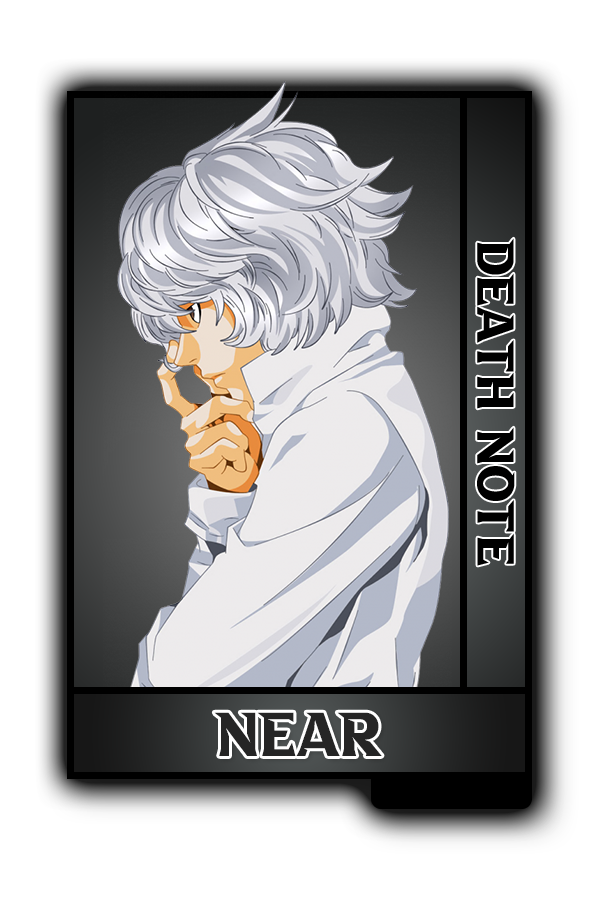
<style>
.page{position:relative;width:600px;height:900px;background:#ffffff}
.page>*{position:absolute;margin:0}
.t1{font:48.8px "aAbsoluteEmpire";color:#000000}
.t2{font:58.3px "aAbsoluteEmpire";color:#252525}
</style>
<div class="page">
<p class="t1" style="left:477px;top:238px;width:38px;height:328px;rotate:90deg">Death Note</p>
<p class="t2" style="left:214px;top:712px;width:168px;height:44px">Near</p>
</div>
